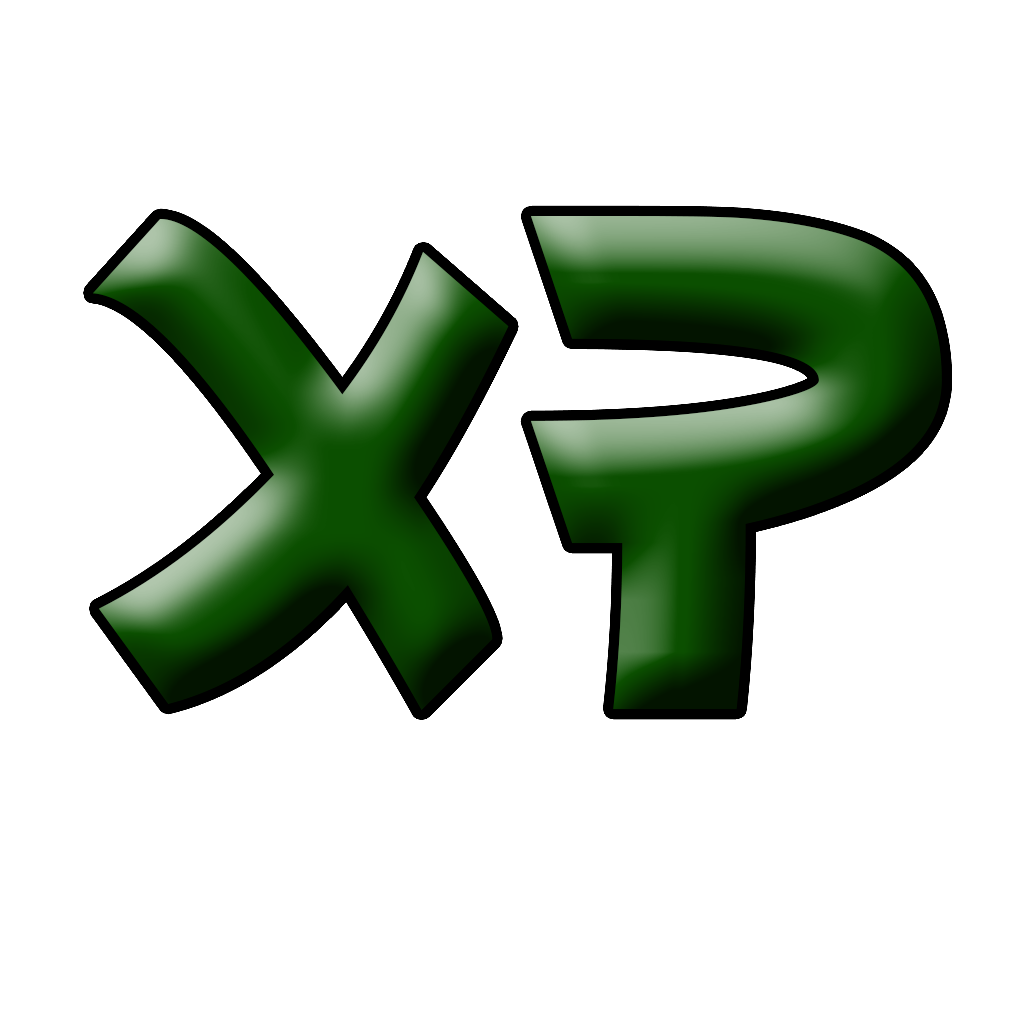
<style>
.page{position:relative;width:1024px;height:1024px;background:#ffffff}
.page>*{position:absolute;margin:0}
.t1{font:666.7px "ChinyenNormal"}
</style>
<div class="page">
<p class="t1" style="left:93px;top:216px;width:849px;height:494px">xp</p>
</div>
